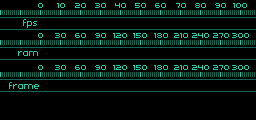
<style>
.page{position:relative;width:256px;height:120px;background:#000000}
.page>*{position:absolute;margin:0}
.t1{font:8px "Uni0553";color:#1cd2ae}
.t2{font:8px "Standard0753";color:#1cd2ae}
</style>
<div class="page">
<p class="t1" style="left:38px;top:3px;width:5px;height:5px">0</p>
<p class="t1" style="left:57px;top:3px;width:8px;height:5px">10</p>
<p class="t1" style="left:75px;top:3px;width:11px;height:5px">20</p>
<p class="t1" style="left:95px;top:3px;width:11px;height:5px">30</p>
<p class="t1" style="left:115px;top:3px;width:11px;height:5px">40</p>
<p class="t1" style="left:135px;top:3px;width:11px;height:5px">50</p>
<p class="t1" style="left:155px;top:3px;width:11px;height:5px">60</p>
<p class="t1" style="left:176px;top:3px;width:10px;height:5px">70</p>
<p class="t1" style="left:195px;top:3px;width:11px;height:5px">80</p>
<p class="t1" style="left:215px;top:3px;width:11px;height:5px">90</p>
<p class="t1" style="left:233px;top:3px;width:14px;height:5px">100</p>
<p class="t2" style="left:23px;top:19px;width:14px;height:9px">fps</p>
<p class="t1" style="left:38px;top:33px;width:5px;height:5px">0</p>
<p class="t1" style="left:55px;top:33px;width:11px;height:5px">30</p>
<p class="t1" style="left:75px;top:33px;width:11px;height:5px">60</p>
<p class="t1" style="left:95px;top:33px;width:11px;height:5px">90</p>
<p class="t1" style="left:113px;top:33px;width:14px;height:5px">120</p>
<p class="t1" style="left:133px;top:33px;width:14px;height:5px">150</p>
<p class="t1" style="left:154px;top:33px;width:14px;height:5px">180</p>
<p class="t1" style="left:174px;top:33px;width:14px;height:5px">210</p>
<p class="t1" style="left:192px;top:33px;width:17px;height:5px">240</p>
<p class="t1" style="left:213px;top:33px;width:16px;height:5px">270</p>
<p class="t1" style="left:232px;top:33px;width:17px;height:5px">300</p>
<p class="t2" style="left:18px;top:51px;width:20px;height:5px">ram</p>
<p class="t1" style="left:38px;top:65px;width:5px;height:5px">0</p>
<p class="t1" style="left:55px;top:65px;width:11px;height:5px">30</p>
<p class="t1" style="left:75px;top:65px;width:11px;height:5px">60</p>
<p class="t1" style="left:95px;top:65px;width:11px;height:5px">90</p>
<p class="t1" style="left:113px;top:65px;width:14px;height:5px">120</p>
<p class="t1" style="left:133px;top:65px;width:14px;height:5px">150</p>
<p class="t1" style="left:154px;top:65px;width:14px;height:5px">180</p>
<p class="t1" style="left:174px;top:65px;width:14px;height:5px">210</p>
<p class="t1" style="left:192px;top:65px;width:17px;height:5px">240</p>
<p class="t1" style="left:213px;top:65px;width:16px;height:5px">270</p>
<p class="t1" style="left:232px;top:65px;width:17px;height:5px">300</p>
<p class="t2" style="left:9px;top:82px;width:30px;height:7px">frame</p>
</div>
